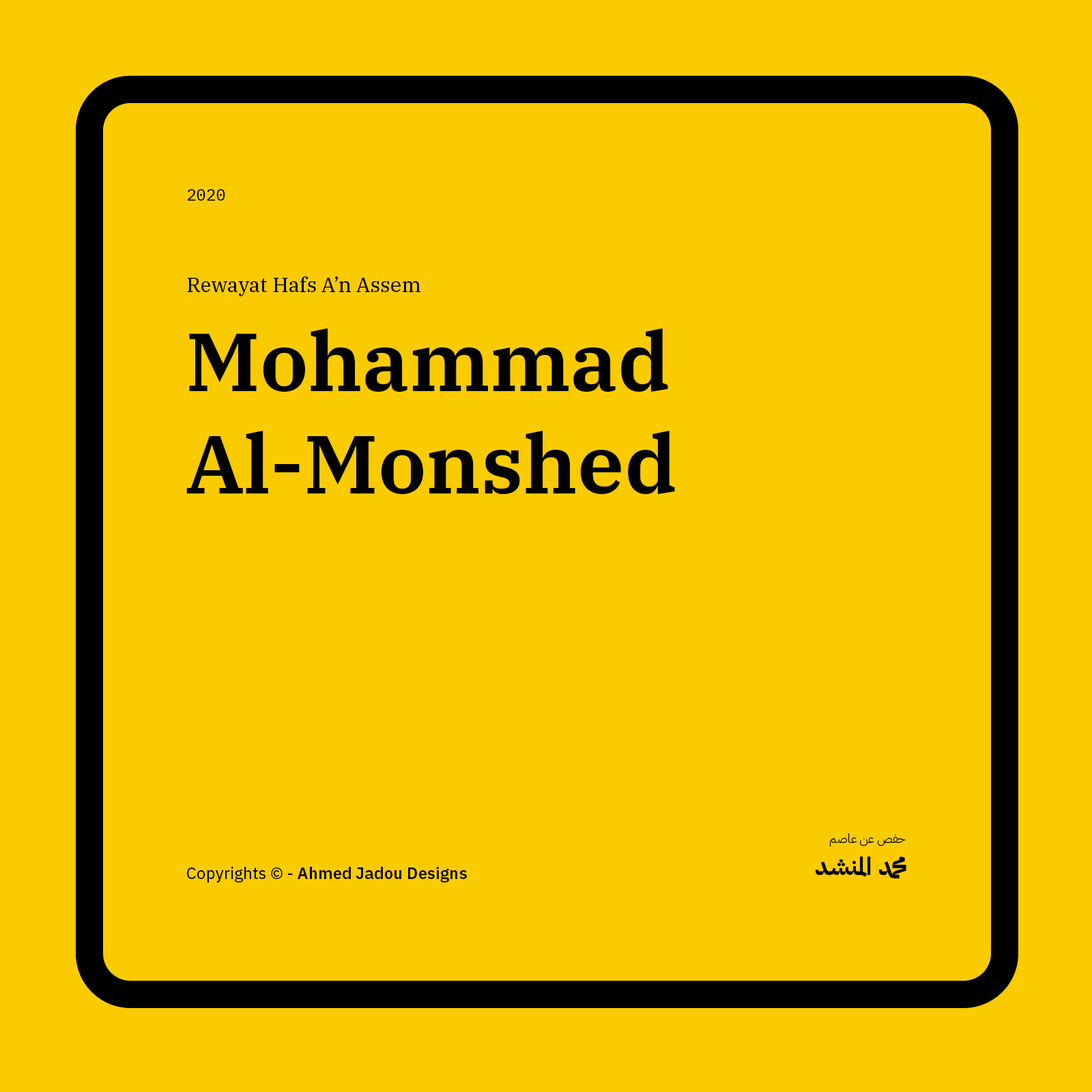
<style>
.page{position:relative;width:1092px;height:1092px;background:#facb00}
.page>*{position:absolute;margin:0}
.t1{font:16.4px "IBMPlexMono-Text";color:#000000}
.t2{font:20.5px "IBMPlexSerif-Text";color:#000000}
.t3{font:81.9px/102.7px "IBMPlexSerif-SemiBold";color:#000000}
.t4{font:12.3px "IBMPlexArabic-Light";color:#000000}
.t5{font:24.6px "IBMPlexArabic-Bold";color:#000000}
.t6{font:16.4px "IBMPlexSans-SemiBold";color:#000000}
.t7{font:16.4px "IBMPlexSans-Text";color:#000000}
</style>
<div class="page">
<p class="t1" style="left:188px;top:189px;width:37px;height:12px">2020</p>
<p class="t2" style="left:187px;top:276px;width:233px;height:20px">Rewayat Hafs A’n Assem</p>
<p class="t3" style="left:186px;top:328px;width:489px;height:166px">Mohammad Al-Monshed</p>
<p class="t4" style="left:830px;top:833px;width:76px;height:14px">حفص عن عاصم</p>
<p class="t5" style="left:816px;top:857px;width:90px;height:21px">محمد المنشد</p>
<p class="t6" style="left:187px;top:867px;width:280px;height:15px"><span class="t7">Copyrights © - </span>Ahmed Jadou Designs</p>
</div>
